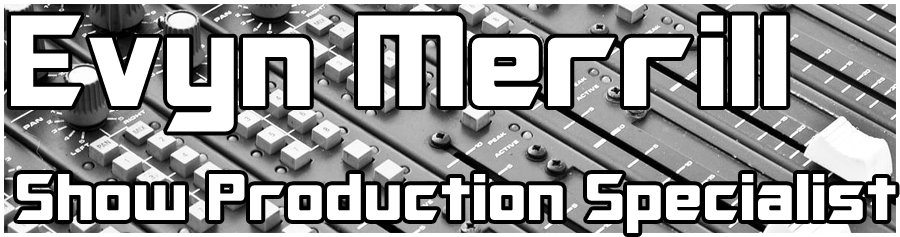
<style>
.page{position:relative;width:900px;height:237px;background:#ffffff}
.page>*{position:absolute;margin:0}
.t1{font:130px "Optimus";color:#ffffff}
.t2{font:66px "Optimus";color:#ffffff}
</style>
<div class="page">
<p class="t1" style="left:11px;top:15px;width:776px;height:117px">Evyn Merrill</p>
<p class="t2" style="left:17px;top:174px;width:879px;height:59px">Show Production Specialist</p>
</div>
